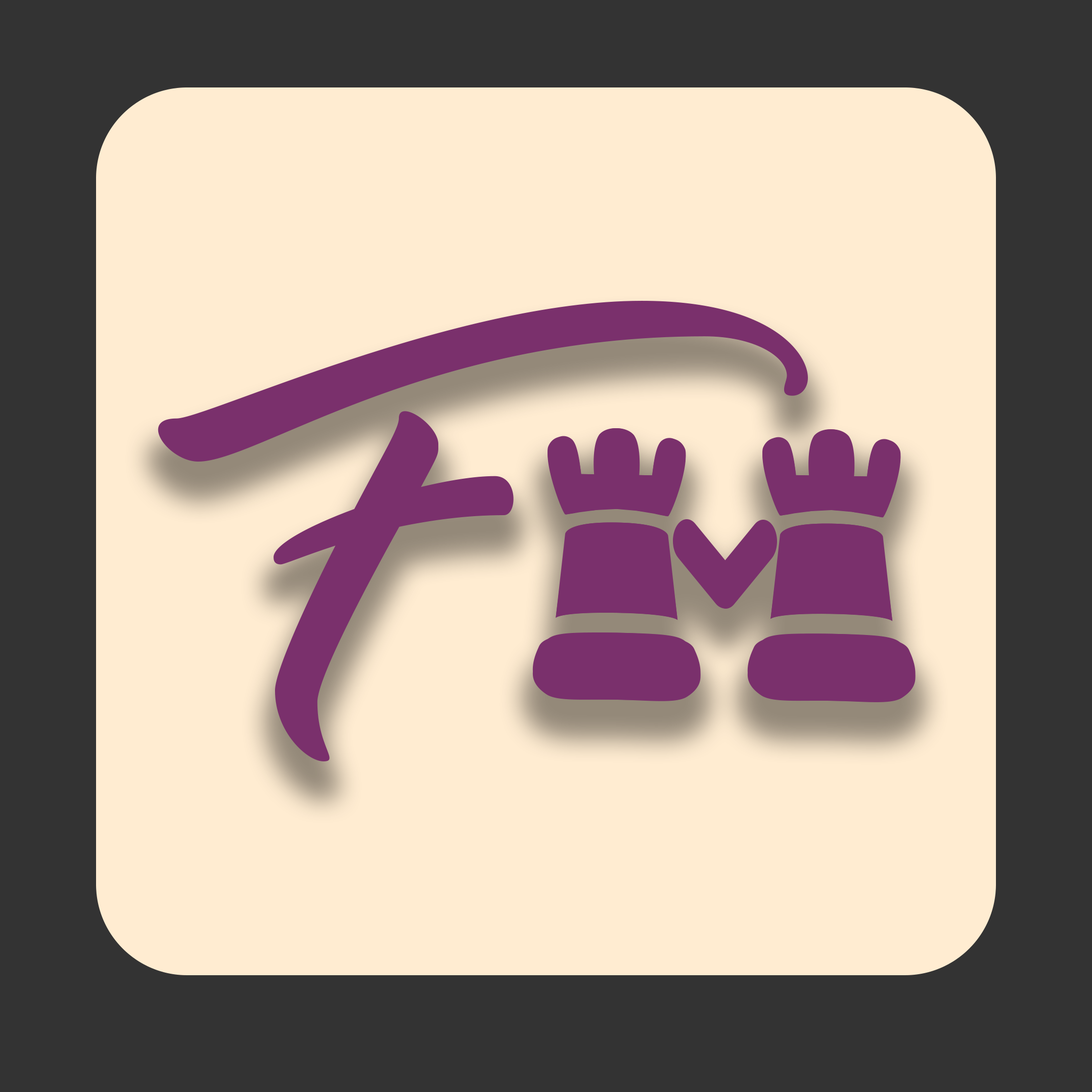
<style>
.page{position:relative;width:1092px;height:1092px;background:#ffecd1}
.page>*{position:absolute;margin:0}
.t1{font:362px "ThinkingOfBettyLight";color:#7a306c}
</style>
<div class="page">
<p class="t1" style="left:158px;top:301px;width:650px;height:460px">F</p>
</div>
